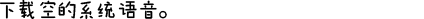
<style>
.page{position:relative;width:424px;height:19px;background:#ffffff}
.page>*{position:absolute;margin:0}
.t1{font:22px "¢è?";color:#000000}
</style>
<div class="page">
<p class="t1" style="left:0px;top:0px;width:167px;height:20px">下载空的系统语音。</p>
</div>
